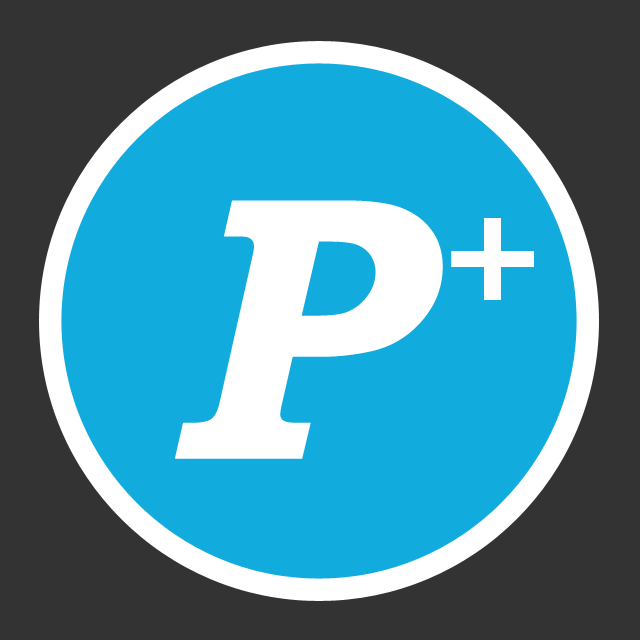
<style>
.page{position:relative;width:640px;height:640px;background:#12abdd}
.page>*{position:absolute;margin:0}
.t1{font:378.7px "BookmanOldStyle-BoldItalic";letter-spacing:0.02em;color:#ffffff}
.t2{font:171px "BookmanOldStyle-BoldItalic";letter-spacing:0.02em;color:#fefefe}
</style>
<div class="page">
<p class="t1" style="left:175px;top:200px;width:268px;height:259px">P</p>
<p class="t2" style="left:451px;top:218px;width:83px;height:82px">+</p>
</div>
